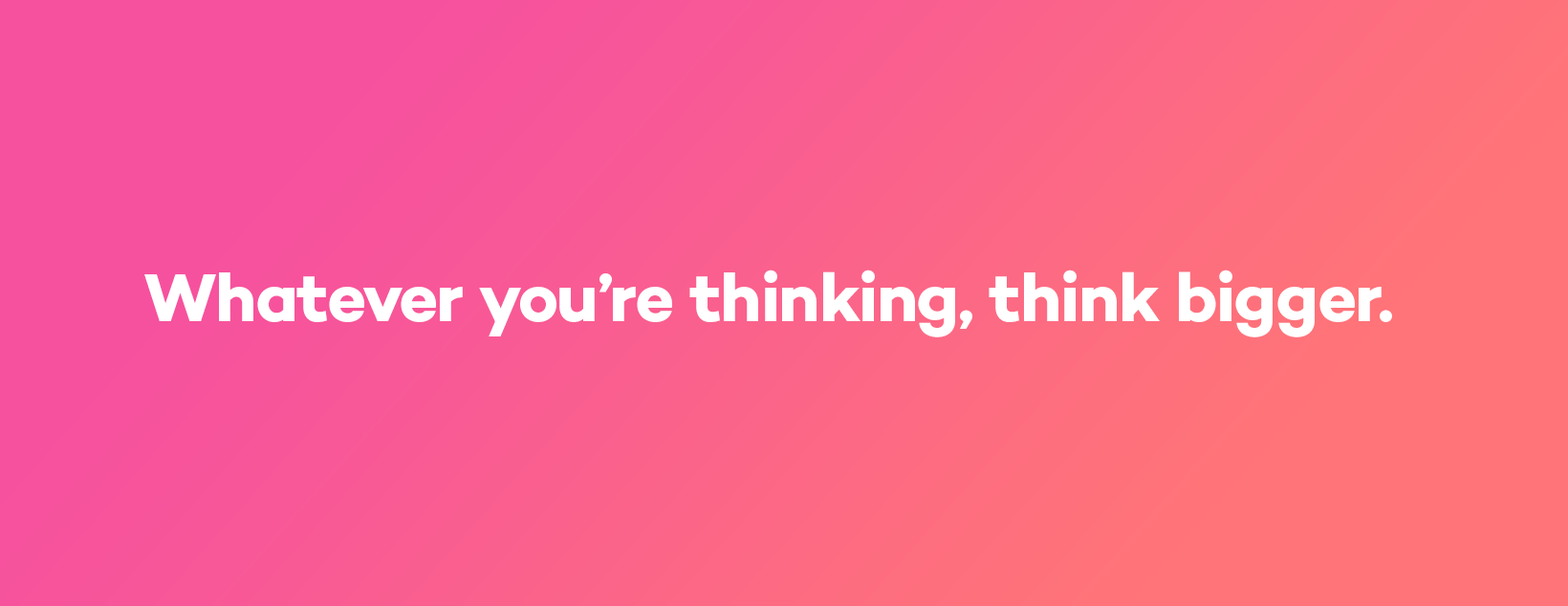
<style>
.page{position:relative;width:1568px;height:606px}
.page>*{position:absolute;margin:0}
.t1{font:68.8px "Campton-BoldDEMO";letter-spacing:-0.02em;color:#ffffff}
</style>
<div class="page">
<p class="t1" style="left:144px;top:270px;width:1248px;height:68px">Whatever you’re thinking, think bigger.</p>
</div>
